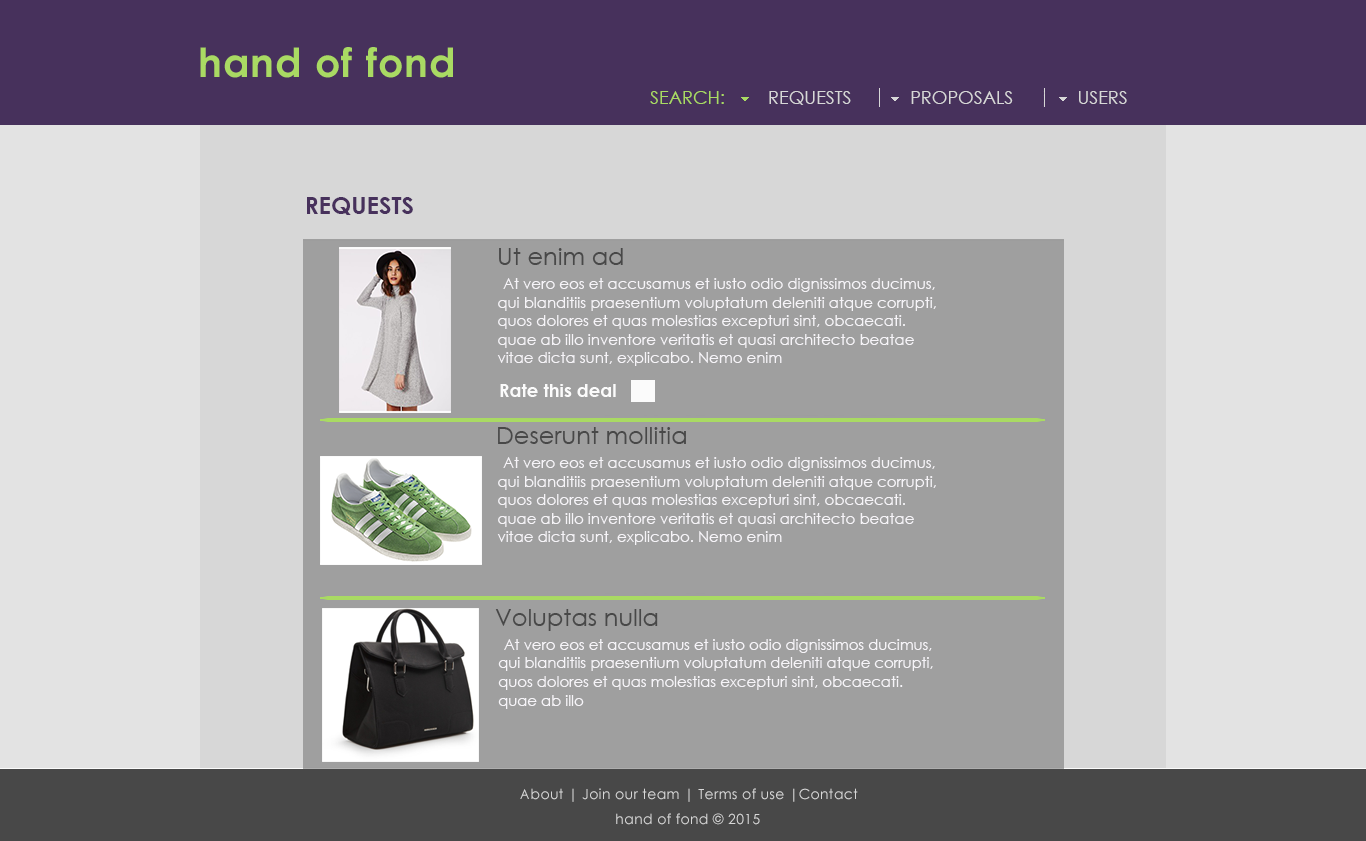
<style>
.page{position:relative;width:1366px;height:841px;background:#9f9f9f}
.page>*{position:absolute;margin:0}
.t1{font:18px "CenturyGothic";color:#a9da63}
.t2{font:18px "CenturyGothic";color:#d7d7d7}
.t3{font:24px "CenturyGothic-Bold";color:#47315c}
.t4{font:24px "CenturyGothic";color:#484848}
.t5{font:24px "CenturyGothic-Bold";color:#7a7a7a}
.t6{font:15.4px "CenturyGothic";color:#f6f4f8;scale:0.97 1}
.t7{font:20.6px "CenturyGothic";color:#f6f4f8;scale:0.97 1}
.t8{font:18px "CenturyGothic-Bold";color:#fbfbfb}
.t9{font:15.5px "CenturyGothic";color:#f6f4f8;scale:0.95 1}
.t10{font:20.7px "CenturyGothic";color:#f6f4f8;scale:0.95 1}
.t11{font:14px "CenturyGothic";letter-spacing:0.025em;color:#d7d7d7}
</style>
<div class="page">
<p class="t1" style="left:650px;top:91px;width:74px;height:13px">SEARCH:</p>
<p class="t2" style="left:769px;top:91px;width:82px;height:14px">REQUESTS</p>
<p class="t2" style="left:911px;top:91px;width:102px;height:13px">PROPOSALS</p>
<p class="t2" style="left:1079px;top:91px;width:48px;height:13px">USERS</p>
<p class="t3" style="left:307px;top:197px;width:106px;height:18px">REQUESTS</p>
<p class="t4" style="left:499px;top:248px;width:124px;height:17px"><span class="t5"> </span>Ut enim ad</p>
<p class="t6" style="left:497px;top:278px;width:439px;height:88px"><span class="t7"> </span>At vero eos et accusamus et iusto odio dignissimos ducimus, <br>qui blanditiis praesentium voluptatum deleniti atque corrupti, <br>quos dolores et quas molestias excepturi sint, obcaecati.  <br>quae ab illo inventore veritatis et quasi architecto beatae <br>vitae dicta sunt, explicabo. Nemo enim</p>
<p class="t8" style="left:500px;top:384px;width:116px;height:13px">Rate this deal</p>
<p class="t4" style="left:498px;top:427px;width:188px;height:17px"><span class="t5"> </span>Deserunt mollitia</p>
<p class="t6" style="left:497px;top:457px;width:439px;height:88px"><span class="t7"> </span>At vero eos et accusamus et iusto odio dignissimos ducimus, <br>qui blanditiis praesentium voluptatum deleniti atque corrupti, <br>quos dolores et quas molestias excepturi sint, obcaecati.  <br>quae ab illo inventore veritatis et quasi architecto beatae <br>vitae dicta sunt, explicabo. Nemo enim</p>
<p class="t4" style="left:495px;top:609px;width:163px;height:22px"><span class="t5"> </span>Voluptas nulla</p>
<p class="t9" style="left:498px;top:639px;width:435px;height:70px"><span class="t10"> </span>At vero eos et accusamus et iusto odio dignissimos ducimus, <br>qui blanditiis praesentium voluptatum deleniti atque corrupti, <br>quos dolores et quas molestias excepturi sint, obcaecati.  <br>quae ab illo</p>
<p class="t11" style="left:520px;top:788px;width:338px;height:14px">About | Join our team | Terms of use |Contact</p>
<p class="t11" style="left:616px;top:813px;width:144px;height:12px">hand of fond © 2015</p>
</div>
